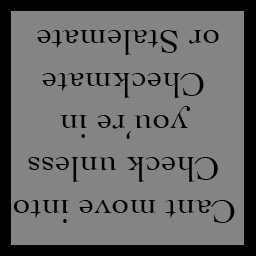
<style>
.page{position:relative;width:256px;height:256px;background:#848484}
.page>*{position:absolute;margin:0}
.t1{font:35.3px "Cochin";color:#000000}
.t2{font:42.3px "Cochin";color:#000000}
</style>
<div class="page">
<p class="t1" style="left:13px;top:30px;width:222px;height:193px;text-align:center;rotate:180deg"><span class="t2">    </span> Cant move into     <br> Check unless<br> you’re in<br> Checkmate<br>or Stalemate</p>
</div>
